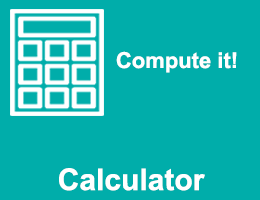
<style>
.page{position:relative;width:260px;height:200px;background:#00adaa}
.page>*{position:absolute;margin:0}
.t1{font:22px "Arial-BoldMT";color:#ffffff}
.t2{font:30px "Arial-BoldMT";color:#ffffff}
</style>
<div class="page">
<p class="t1" style="left:116px;top:51px;width:121px;height:22px">Compute it!</p>
<p class="t2" style="left:59px;top:168px;width:146px;height:23px">Calculator</p>
</div>
